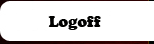
<style>
.page{position:relative;width:154px;height:44px;background:#ffffff}
.page>*{position:absolute;margin:0}
.t1{font:16px "CooperBlack";color:#010100}
</style>
<div class="page">
<p class="t1" style="left:48px;top:16px;width:53px;height:14px">Logoff</p>
</div>
